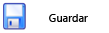
<style>
.page{position:relative;width:109px;height:33px;background:#ffffff}
.page>*{position:absolute;margin:0}
.t1{font:11px "SegoeUI";color:#000000}
</style>
<div class="page">
<p class="t1" style="left:49px;top:14px;width:39px;height:8px">Guardar</p>
</div>
